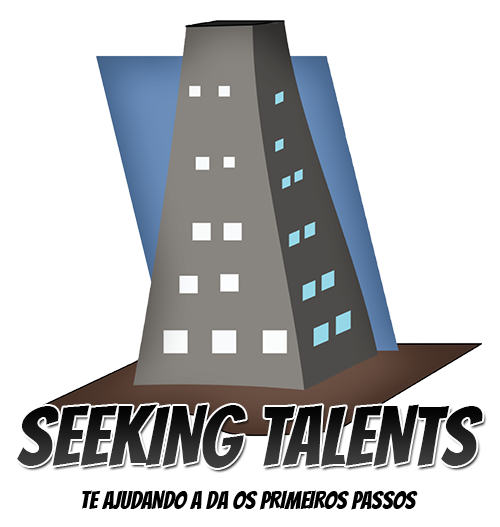
<style>
.page{position:relative;width:500px;height:527px;background:#ffffff}
.page>*{position:absolute;margin:0}
.t1{font:82.2px "Bangers-Regular";text-transform:uppercase}
.t2{font:24.7px "Bangers-Regular";color:#000000;text-transform:uppercase}
</style>
<div class="page">
<p class="t1" style="left:17px;top:404px;width:466px;height:64px">Seeking talents</p>
<p class="t2" style="left:82px;top:490px;width:336px;height:20px">te ajudando a da os primeiros passos</p>
</div>
